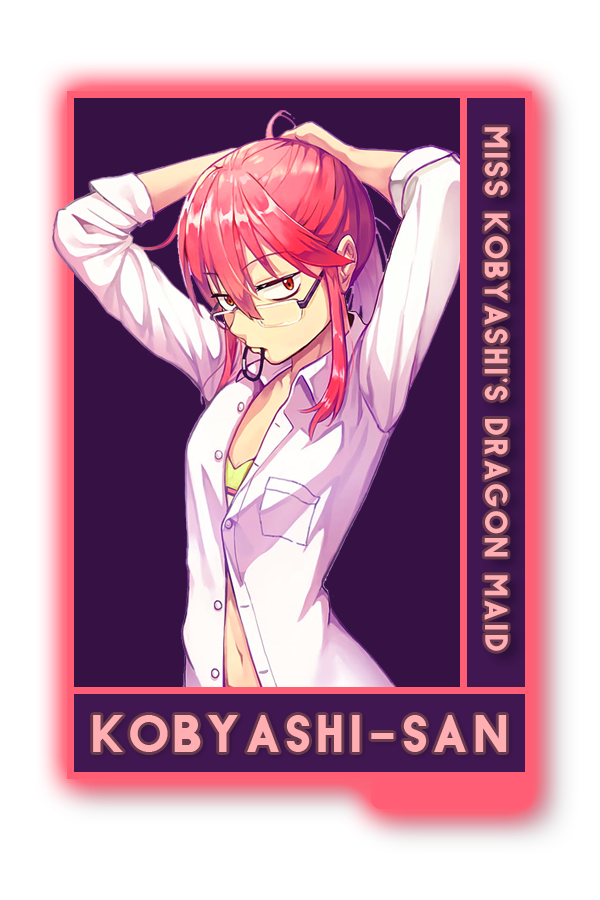
<style>
.page{position:relative;width:600px;height:900px;background:#ffffff}
.page>*{position:absolute;margin:0}
.t1{font:29.2px "Antraste";color:#fbadaa}
.t2{font:48.4px "Antraste";color:#fbadaa}
</style>
<div class="page">
<p class="t1" style="left:484px;top:127px;width:24px;height:524px;rotate:90deg">MISS KOBYASHI'S DRAGON MAID</p>
<p class="t2" style="left:93px;top:715px;width:414px;height:37px">Kobyashi-SAN</p>
</div>
